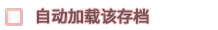
<style>
.page{position:relative;width:218px;height:30px;background:#ffffff}
.page>*{position:absolute;margin:0}
.t1{font:16px "SourceHanSansSC-Regular";color:#705555;font-weight:bold}
</style>
<div class="page">
<p class="t1" style="left:37px;top:8px;width:112px;height:16px">自动加载该存档</p>
</div>
